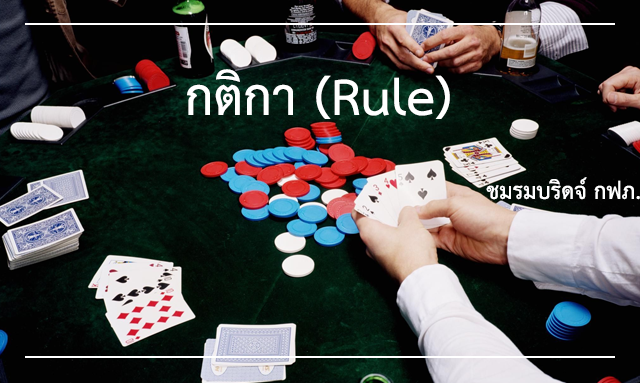
<style>
.page{position:relative;width:640px;height:383px}
.page>*{position:absolute;margin:0}
.t1{font:73.3px "THSarabunNew-Bold";color:#ffffff}
.t2{font:32px "THSarabunNew-Bold";color:#ffffff}
</style>
<div class="page">
<p class="t1" style="left:187px;top:69px;width:263px;height:50px">กติกา (Rule)</p>
<p class="t2" style="left:486px;top:177px;width:154px;height:23px">ชมรมบริดจ์ กฟภ.</p>
</div>
